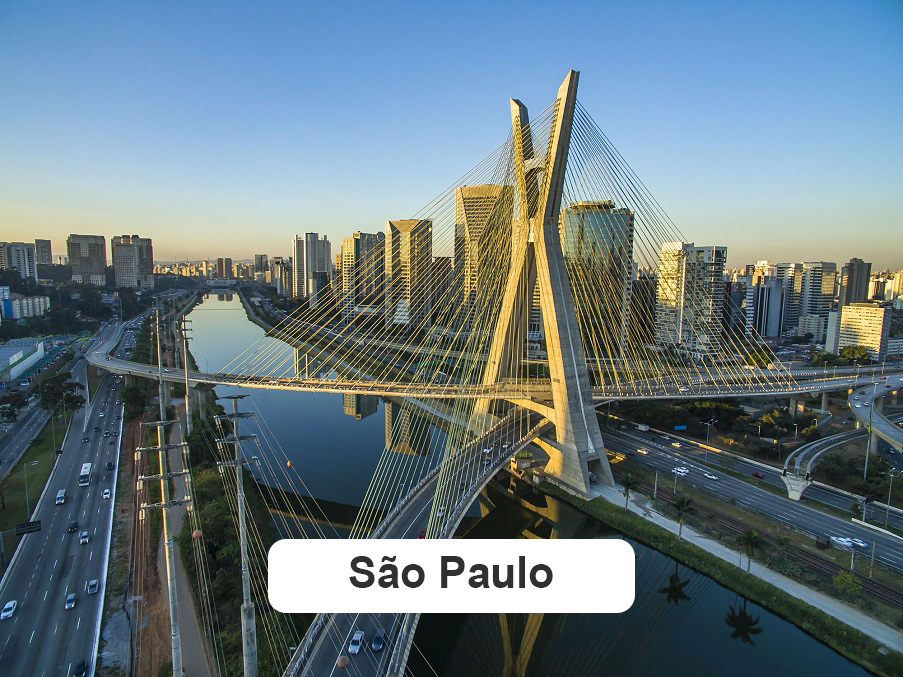
<style>
.page{position:relative;width:903px;height:677px}
.page>*{position:absolute;margin:0}
.t1{font:43.9px "Arial-BoldMT";color:#313030}
</style>
<div class="page">
<p class="t1" style="left:349px;top:556px;width:204px;height:32px">São Paulo</p>
</div>
